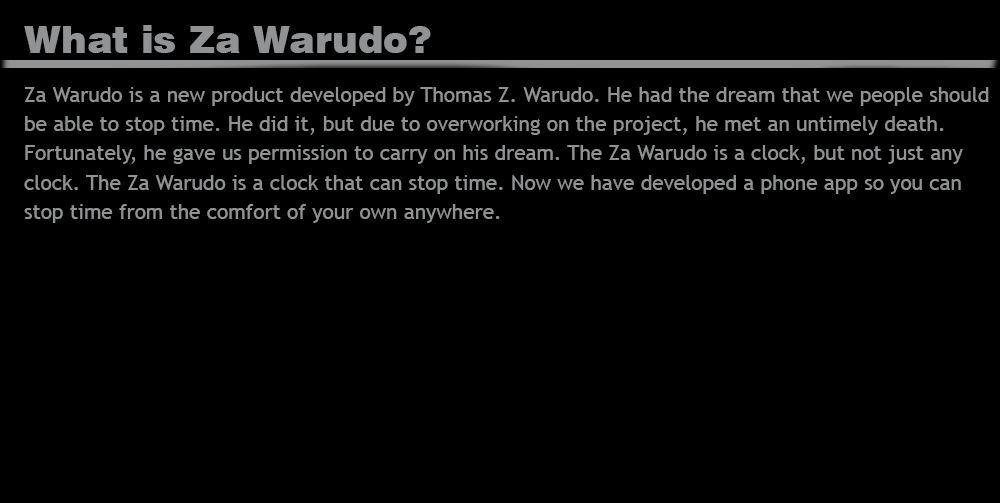
<style>
.page{position:relative;width:1000px;height:503px;background:#000000}
.page>*{position:absolute;margin:0}
.t1{font:37.5px "Swiss721BT-Black";color:#909293}
.t2{font:20.8px/29.2px "TrebuchetMS";color:#909293}
</style>
<div class="page">
<p class="t1" style="left:24px;top:25px;width:407px;height:28px">What is Za Warudo?</p>
<p class="t2" style="left:24px;top:87px;width:965px;height:136px">Za Warudo is a new product developed by Thomas Z. Warudo. He had the dream that we people should <br>be able to stop time. He did it, but due to overworking on the project, he met an untimely death. <br>Fortunately, he gave us permission to carry on his dream. The Za Warudo is a clock, but not just any<br>clock. The Za Warudo is a clock that can stop time. Now we have developed a phone app so you can<br>stop time from the comfort of your own anywhere.</p>
</div>
